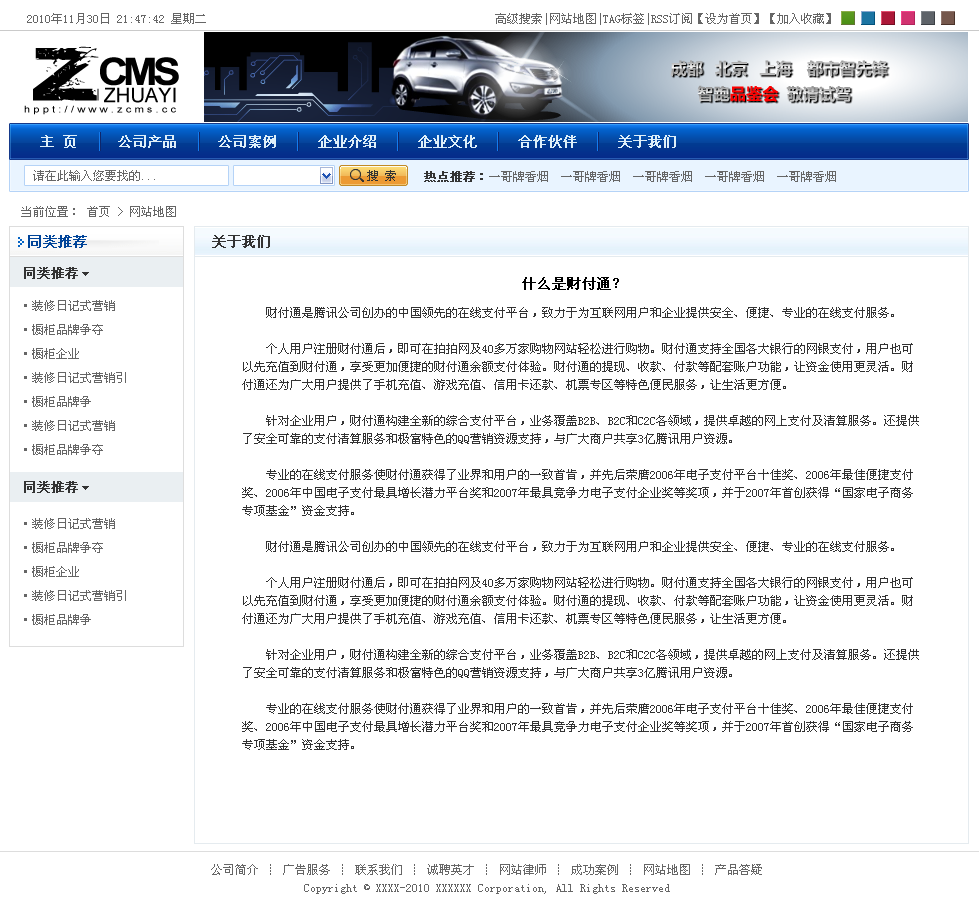
<style>
.page{position:relative;width:979px;height:903px;background:#ffffff}
.page>*{position:absolute;margin:0}
.t1{font:12px "SimSun";color:#666666}
.t2{font:14px "SimSun";color:#deeff9;font-weight:bold}
.t3{font:12px "SimSun";color:#333333}
.t4{font:12px "SimSun";color:#333333;font-weight:bold}
.t5{font:14px "SimSun";color:#004499;font-weight:bold}
.t6{font:14px "SimSun";color:#333333;font-weight:bold}
.t7{font:13px "SimSun";color:#333333;font-weight:bold}
.t8{font:14px "SimSun";color:#000000;font-weight:bold}
.t9{font:12px/24px "SimSun";color:#666666}
.t10{font:12px/18px "SimSun";color:#333333}
.t11{font:12px/18px "SimSun";color:#666666}
</style>
<div class="page">
<p class="t1" style="left:27px;top:13px;width:804px;height:12px">2010年11月30日 21:47:42 星期二                                                高级搜索|网站地图|TAG标签|RSS订阅【设为首页】【加入收藏】</p>
<p class="t2" style="left:40px;top:135px;width:636px;height:13px">主 页     公司产品     公司案例     企业介绍     企业文化     合作伙伴     关于我们</p>
<p class="t1" style="left:33px;top:170px;width:122px;height:11px">请在此输入您要找的...</p>
<p class="t3" style="left:367px;top:170px;width:29px;height:11px">搜 索</p>
<p class="t1" style="left:424px;top:171px;width:412px;height:11px"><span class="t4">热点推荐：</span>一哥牌香烟  一哥牌香烟  一哥牌香烟  一哥牌香烟  一哥牌香烟</p>
<p class="t1" style="left:21px;top:206px;width:155px;height:11px">当前位置： 首页 &gt; 网站地图</p>
<p class="t5" style="left:28px;top:235px;width:59px;height:13px">同类推荐</p>
<p class="t6" style="left:212px;top:235px;width:58px;height:13px">关于我们</p>
<p class="t7" style="left:24px;top:267px;width:54px;height:12px">同类推荐</p>
<p class="t8" style="left:522px;top:277px;width:97px;height:13px">什么是财付通？</p>
<p class="t9" style="left:24px;top:300px;width:102px;height:155px">·装修日记式营销<br>·橱柜品牌争夺<br>·橱柜企业<br>·装修日记式营销引<br>·橱柜品牌争<br>·装修日记式营销<br>·橱柜品牌争夺</p>
<p class="t10" style="left:242px;top:307px;width:677px;height:443px">财付通是腾讯公司创办的中国领先的在线支付平台，致力于为互联网用户和企业提供安全、便捷、专业的在线支付服务。<br><br>    个人用户注册财付通后，即可在拍拍网及40多万家购物网站轻松进行购物。财付通支持全国各大银行的网银支付，用户也可以先充值到财付通，享受更加便捷的财付通余额支付体验。财付通的提现、收款、付款等配套账户功能，让资金使用更灵活。财付通还为广大用户提供了手机充值、游戏充值、信用卡还款、机票专区等特色便民服务，让生活更方便。<br><br>    针对企业用户，财付通构建全新的综合支付平台，业务覆盖B2B、B2C和C2C各领域，提供卓越的网上支付及清算服务。还提供了安全可靠的支付清算服务和极富特色的QQ营销资源支持，与广大商户共享3亿腾讯用户资源。<br><br>    专业的在线支付服务使财付通获得了业界和用户的一致首肯，并先后荣膺2006年电子支付平台十佳奖、2006年最佳便捷支付奖、2006年中国电子支付最具增长潜力平台奖和2007年最具竞争力电子支付企业奖等奖项，并于2007年首创获得“国家电子商务专项基金”资金支持。<br><br>    财付通是腾讯公司创办的中国领先的在线支付平台，致力于为互联网用户和企业提供安全、便捷、专业的在线支付服务。<br><br>    个人用户注册财付通后，即可在拍拍网及40多万家购物网站轻松进行购物。财付通支持全国各大银行的网银支付，用户也可以先充值到财付通，享受更加便捷的财付通余额支付体验。财付通的提现、收款、付款等配套账户功能，让资金使用更灵活。财付通还为广大用户提供了手机充值、游戏充值、信用卡还款、机票专区等特色便民服务，让生活更方便。<br><br>    针对企业用户，财付通构建全新的综合支付平台，业务覆盖B2B、B2C和C2C各领域，提供卓越的网上支付及清算服务。还提供了安全可靠的支付清算服务和极富特色的QQ营销资源支持，与广大商户共享3亿腾讯用户资源。<br><br>    专业的在线支付服务使财付通获得了业界和用户的一致首肯，并先后荣膺2006年电子支付平台十佳奖、2006年最佳便捷支付奖、2006年中国电子支付最具增长潜力平台奖和2007年最具竞争力电子支付企业奖等奖项，并于2007年首创获得“国家电子商务专项基金”资金支持。</p>
<p class="t7" style="left:24px;top:481px;width:54px;height:12px">同类推荐</p>
<p class="t9" style="left:24px;top:518px;width:102px;height:107px">·装修日记式营销<br>·橱柜品牌争夺<br>·橱柜企业<br>·装修日记式营销引<br>·橱柜品牌争</p>
<p class="t11" style="left:211px;top:864px;width:551px;height:30px;text-align:center">公司简介 ┊ 广告服务 ┊ 联系我们 ┊ 诚聘英才 ┊ 网站律师 ┊ 成功案例 ┊ 网站地图 ┊ 产品答疑<br>Copyright © XXXX-2010 XXXXXX Corporation, All Rights Reserved</p>
</div>
